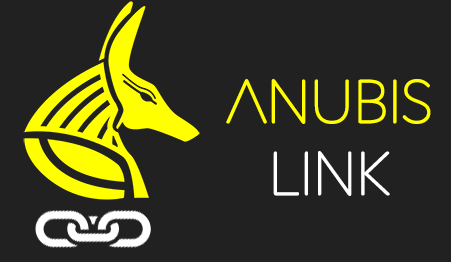
<style>
.page{position:relative;width:451px;height:262px;background:#212121}
.page>*{position:absolute;margin:0}
.t1{font:60px "Posterama2001W04-Thin";letter-spacing:-0.01em;color:#ffff00;font-weight:bold}
.t2{font:60px "Posterama2001W04-Thin";letter-spacing:-0.01em;color:#ffffff;font-weight:bold}
</style>
<div class="page">
<p class="t1" style="left:226px;top:79px;width:205px;height:117px;text-align:center">ANUBIS<br><span class="t2">LINK</span></p>
</div>
